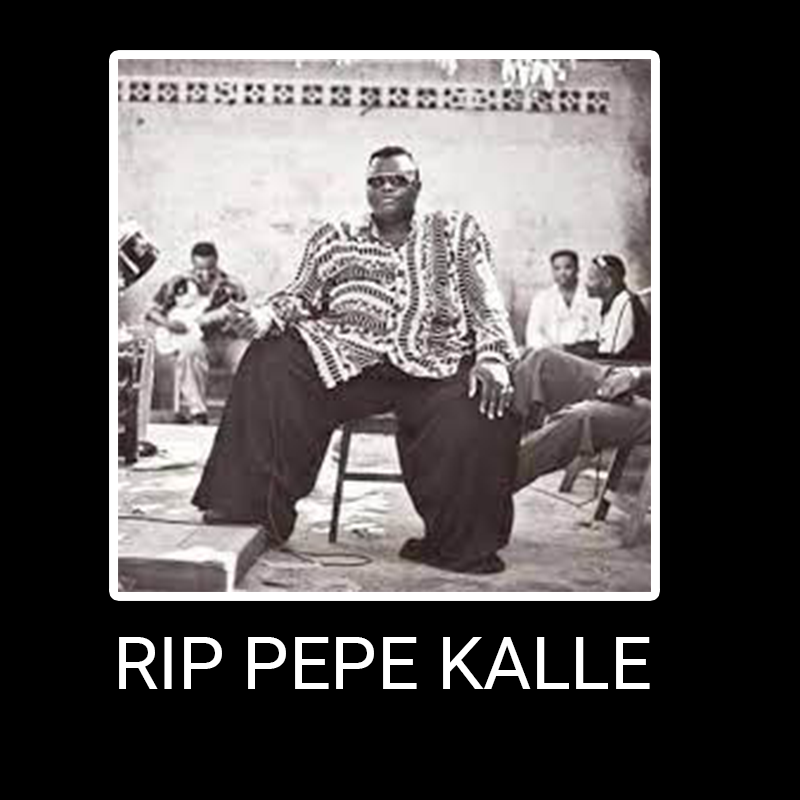
<style>
.page{position:relative;width:800px;height:800px;background:#000000}
.page>*{position:absolute;margin:0}
.t1{font:72.5px "Roboto-Regular";color:#ffffff}
</style>
<div class="page">
<p class="t1" style="left:119px;top:637px;width:531px;height:52px">RIP PEPE KALLE</p>
</div>
